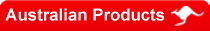
<style>
.page{position:relative;width:210px;height:31px}
.page>*{position:absolute;margin:0}
.t1{font:16.8px "Arial-BoldMT";color:#ffffff}
</style>
<div class="page">
<p class="t1" style="left:5px;top:8px;width:160px;height:13px">Australian Products</p>
</div>
